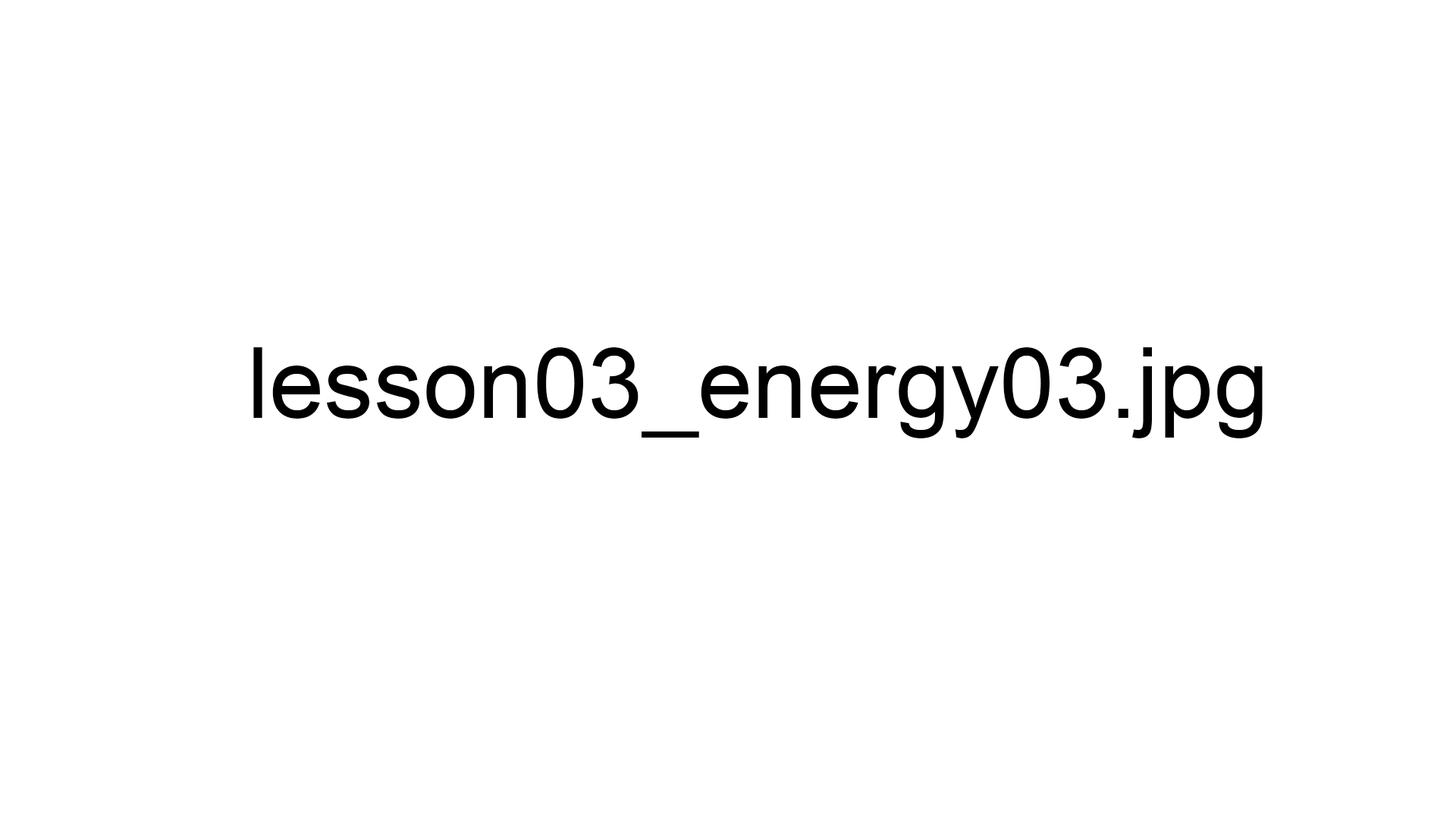
<style>
.page{position:relative;width:1456px;height:819px;background:#ffffff}
.page>*{position:absolute;margin:0}
.t1{font:98.8px "ArialMT";color:#000000}
</style>
<div class="page">
<p class="t1" style="left:253px;top:347px;width:1010px;height:91px">lesson03_energy03.jpg</p>
</div>
